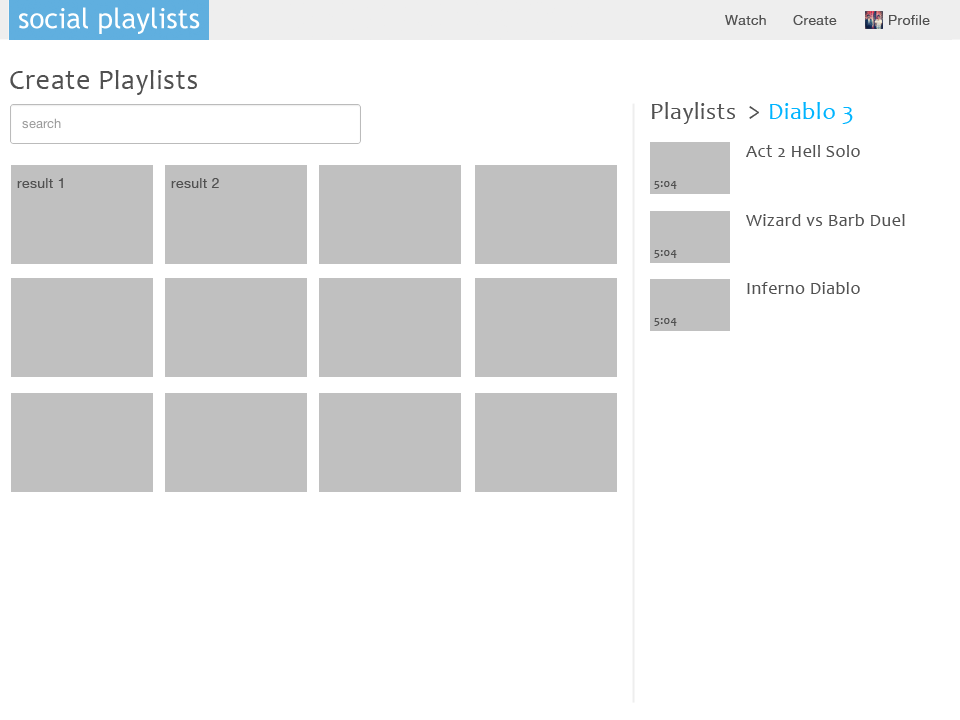
<style>
.page{position:relative;width:960px;height:720px;background:#ffffff}
.page>*{position:absolute;margin:0}
.t1{font:14px "HelveticaNeue";letter-spacing:0.025em;color:#515151}
.t2{font:28px "Candara";letter-spacing:0.025em;color:#515151}
.t3{font:24px "Candara";letter-spacing:0.025em;color:#515151}
.t4{font:24px "Candara";letter-spacing:0.025em;color:#00b4ff}
.t5{font:18px "Candara";letter-spacing:0.025em;color:#515151}
.t6{font:12px "Candara";letter-spacing:0.025em;color:#515151}
</style>
<div class="page">
<p class="t1" style="left:725px;top:15px;width:41px;height:10px">Watch</p>
<p class="t1" style="left:793px;top:15px;width:44px;height:10px">Create</p>
<p class="t1" style="left:889px;top:15px;width:41px;height:10px">Profile</p>
<p class="t2" style="left:10px;top:70px;width:187px;height:25px">Create Playlists</p>
<p class="t3" style="left:652px;top:102px;width:83px;height:22px">Playlists</p>
<p class="t4" style="left:770px;top:102px;width:83px;height:22px">Diablo 3</p>
<p class="t3" style="left:749px;top:106px;width:10px;height:13px">&gt;</p>
<p class="t5" style="left:746px;top:145px;width:114px;height:12px">Act 2 Hell Solo</p>
<p class="t1" style="left:17px;top:178px;width:46px;height:10px">result 1</p>
<p class="t1" style="left:171px;top:178px;width:48px;height:10px">result 2</p>
<p class="t6" style="left:654px;top:181px;width:23px;height:8px">5:04</p>
<p class="t5" style="left:746px;top:214px;width:159px;height:12px">Wizard vs Barb Duel</p>
<p class="t6" style="left:654px;top:250px;width:23px;height:8px">5:04</p>
<p class="t5" style="left:747px;top:282px;width:113px;height:12px">Inferno Diablo</p>
<p class="t6" style="left:654px;top:318px;width:23px;height:8px">5:04</p>
</div>
